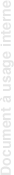
<style>
.page{position:relative;width:14px;height:175px;background:#ffffff}
.page>*{position:absolute;margin:0}
.t1{font:14px "Helvetica-Bold";color:#e6e6e6}
</style>
<div class="page">
<p class="t1" style="left:0px;top:0px;width:14px;height:175px;rotate:-90deg">Document à usage interne</p>
</div>
